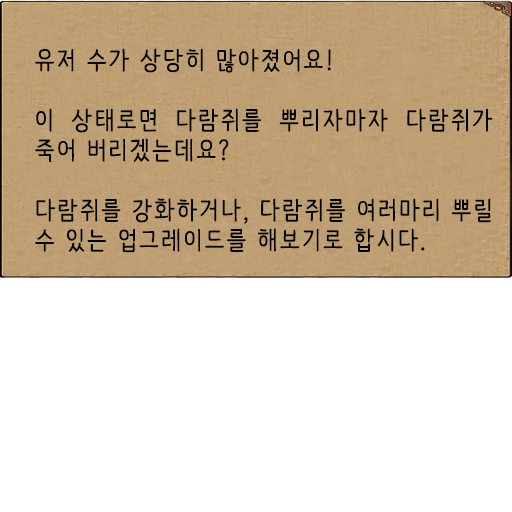
<style>
.page{position:relative;width:512px;height:512px;background:#ffffff}
.page>*{position:absolute;margin:0}
.t1{font:25px "NanumBarunpen";letter-spacing:0.075em;color:#000000;font-weight:bold}
</style>
<div class="page">
<p class="t1" style="left:35px;top:48px;width:458px;height:205px;text-align:justify">유저 수가 상당히 많아졌어요!<br><br>이 상태로면 다람쥐를 뿌리자마자 다람쥐가 죽어 버리겠는데요?<br><br>다람쥐를 강화하거나, 다람쥐를 여러마리 뿌릴 수 있는 업그레이드를 해보기로 합시다.</p>
</div>
